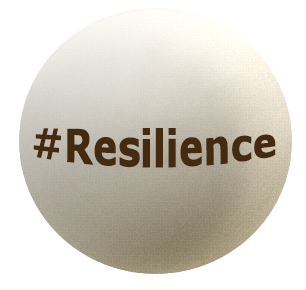
<style>
.page{position:relative;width:306px;height:290px;background:#ffffff}
.page>*{position:absolute;margin:0}
.t1{font:37.5px "Verdana-Bold";color:#442b10}
</style>
<div class="page">
<p class="t1" style="left:33px;top:128px;width:243px;height:40px">#Resilience</p>
</div>
